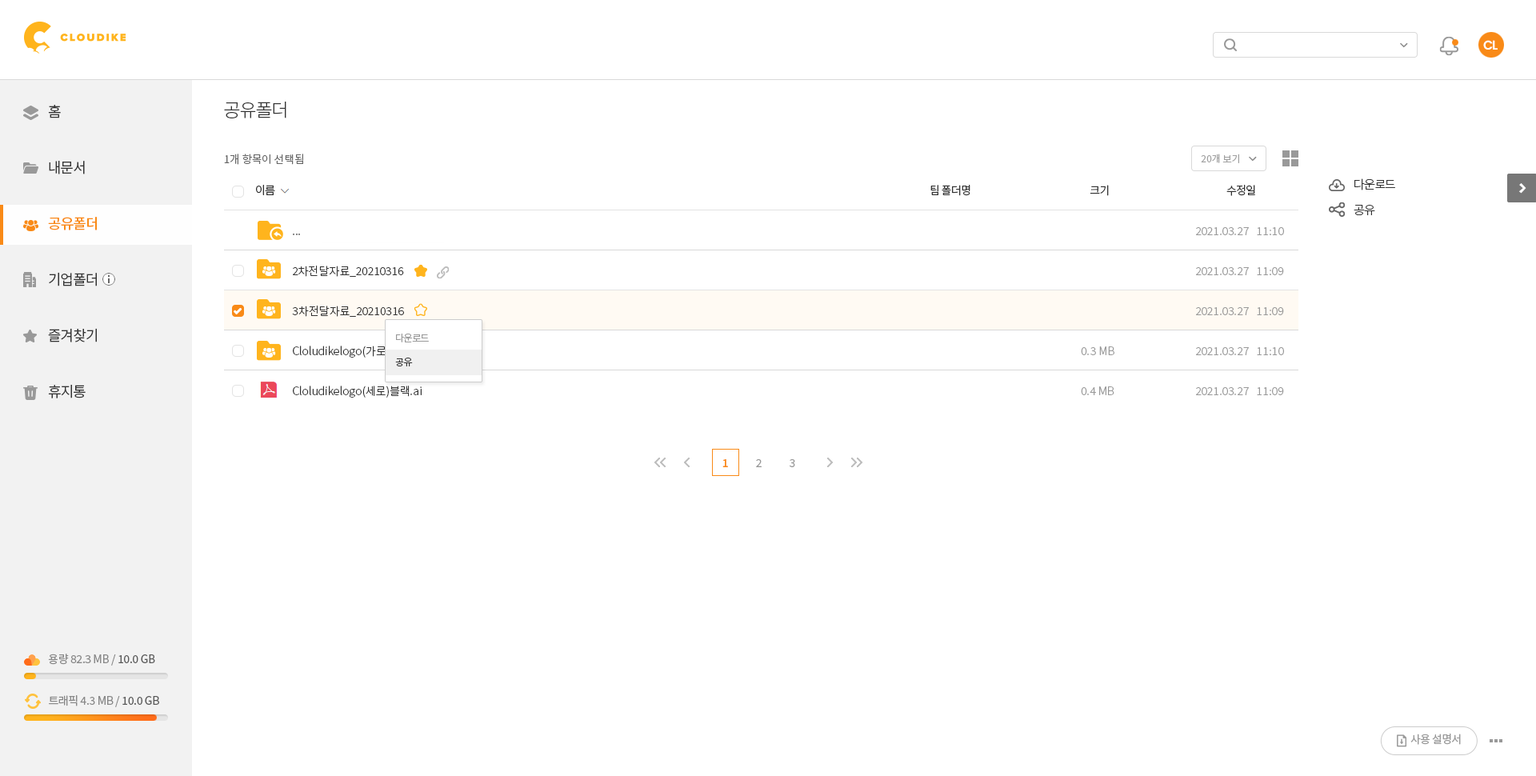
<style>
.page{position:relative;width:1536px;height:776px;background:#ffffff}
.page>*{position:absolute;margin:0}
.t1{font:12.8px "Poppins-SemiBold";letter-spacing:-0.05em;color:#ffffff}
.t2{font:18.4px "NotoSansCJKkr-Light";letter-spacing:-0.05em;color:#333333}
.t3{font:14.4px/56px "NotoSansCJKkr-DemiLight";letter-spacing:-0.05em;color:#333333}
.t4{font:14.4px/56px "NotoSansCJKkr-Medium";letter-spacing:-0.05em;color:#f98a17}
.t5{font:10.8px "NotoSansCJKkr-DemiLight";color:#666666}
.t6{font:9.6px "NotoSansCJKkr-DemiLight";color:#a1a1a1}
.t7{font:11.2px "NotoSansCJKkr-DemiLight";letter-spacing:-0.05em;color:#333333}
.t8{font:12px/25.6px "NotoSansCJKkr-Light";letter-spacing:-0.05em;color:#333333}
.t9{font:11.2px/40px "NotoSansCJKkr-Light";color:#333333}
.t10{font:11.2px/40px "NotoSansCJKkr-Light";color:#999999}
.t11{font:9.6px/24px "NotoSansCJKkr-DemiLight";letter-spacing:-0.025em;color:#999999}
.t12{font:9.6px/24px "NotoSansCJKkr-DemiLight";letter-spacing:-0.025em;color:#333333}
.t13{font:11.2px "NotoSansCJKkr-Medium";color:#f98a17}
.t14{font:11.2px "NotoSansCJKkr-DemiLight";color:#999999}
.t15{font:11.2px "NotoSansCJKkr-Regular";letter-spacing:-0.025em;color:#888888}
.t16{font:11.2px "NotoSansCJKkr-Regular";letter-spacing:-0.025em;color:#585858}
.t17{font:11.2px "NotoSansCJKkr-Regular";letter-spacing:-0.05em;color:#999999}
</style>
<div class="page">
<p class="t1" style="left:1484px;top:40px;width:14px;height:10px">CL</p>
<p class="t2" style="left:224px;top:102px;width:62px;height:16px">공유폴더</p>
<p class="t3" style="left:48px;top:105px;width:49px;height:293px">홈<br>내문서<br><span class="t4">공유폴더<br></span>기업폴더<br>즐겨찾기<br>휴지통</p>
<p class="t5" style="left:224px;top:154px;width:79px;height:11px">1개 항목이 선택됨</p>
<p class="t6" style="left:1201px;top:154px;width:38px;height:9px">20개 보기</p>
<p class="t7" style="left:256px;top:185px;width:19px;height:10px">이름</p>
<p class="t7" style="left:931px;top:185px;width:40px;height:11px">팀 폴더명</p>
<p class="t7" style="left:1090px;top:185px;width:19px;height:11px">크기</p>
<p class="t7" style="left:1227px;top:185px;width:28px;height:11px">수정일</p>
<p class="t8" style="left:1354px;top:178px;width:41px;height:37px">다운로드<br>공유</p>
<p class="t9" style="left:292px;top:234px;width:140px;height:164px">...<br>2차전달자료_20210316<br>3차전달자료_20210316<br>Cloludikelogo(가로)주황색.ai<br>Cloludikelogo(세로)블랙.ai</p>
<p class="t10" style="left:1196px;top:227px;width:88px;height:168px">2021.03.27   11:10<br>2021.03.27   11:09<br>2021.03.27   11:09<br>2021.03.27   11:10<br>2021.03.27   11:09</p>
<p class="t11" style="left:395px;top:334px;width:34px;height:32px">다운로드<br><span class="t12">공유</span></p>
<p class="t10" style="left:1081px;top:346px;width:34px;height:49px">0.3 MB<br>0.4 MB</p>
<p class="t13" style="left:723px;top:459px;width:5px;height:8px">1</p>
<p class="t14" style="left:756px;top:459px;width:6px;height:8px">2</p>
<p class="t14" style="left:790px;top:459px;width:5px;height:8px">3</p>
<p class="t15" style="left:48px;top:654px;width:107px;height:12px">용량 82.3 MB / <span class="t16">10.0 GB</span></p>
<p class="t15" style="left:49px;top:695px;width:110px;height:12px">트래픽 4.3 MB / <span class="t16">10.0 GB</span></p>
<p class="t17" style="left:1411px;top:734px;width:50px;height:11px">사용 설명서</p>
</div>
